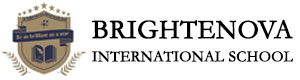
<style>
.page{position:relative;width:300px;height:80px;background:#ffffff}
.page>*{position:absolute;margin:0}
.t1{font:15.4px/23.3px "Garamond";color:#000000;font-weight:bold}
.t2{font:27px/23.3px "Garamond";color:#000000;font-weight:bold}
</style>
<div class="page">
<p class="t1" style="left:92px;top:19px;width:201px;height:43px"><span class="t2">BRIGHTENOVA <br></span>INTERNATIONAL SCHOOL</p>
</div>
